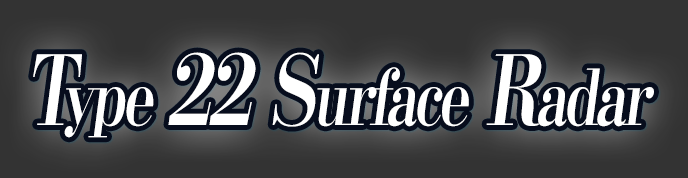
<style>
.page{position:relative;width:688px;height:178px;background:#333333}
.page>*{position:absolute;margin:0}
.t1{font:76.8px "KochoStd-Heavy";letter-spacing:-0.06em;color:#ffffff;font-style:italic;scale:0.75 1}
.t2{font:96px "KochoStd-Heavy";letter-spacing:-0.06em;color:#ffffff;font-style:italic;scale:0.75 1}
</style>
<div class="page">
<p class="t1" style="left:33px;top:52px;width:621px;height:86px"><span class="t2">T</span>ype <span class="t2">22 S</span>urface<span class="t2"> R</span>adar</p>
</div>
